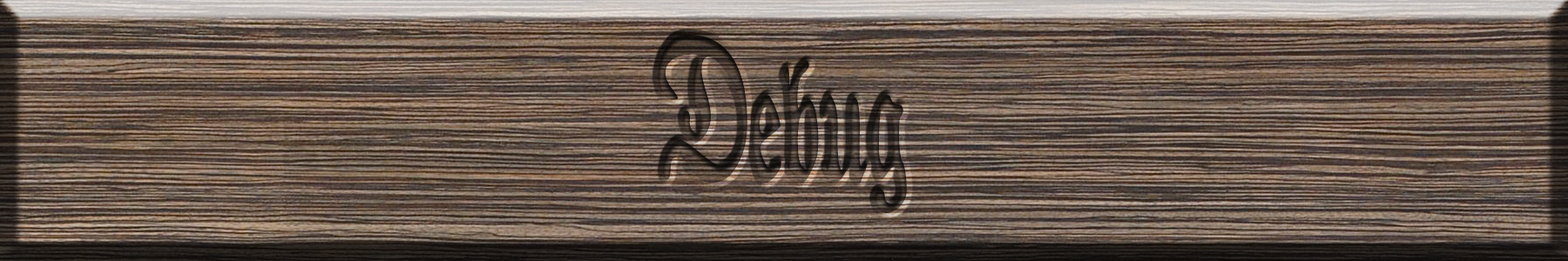
<style>
.page{position:relative;width:1568px;height:261px}
.page>*{position:absolute;margin:0}
.t1{font:326.7px "AuldMagick";scale:0.54 1}
</style>
<div class="page">
<p class="t1" style="left:658px;top:34px;width:249px;height:179px">Debug</p>
</div>
